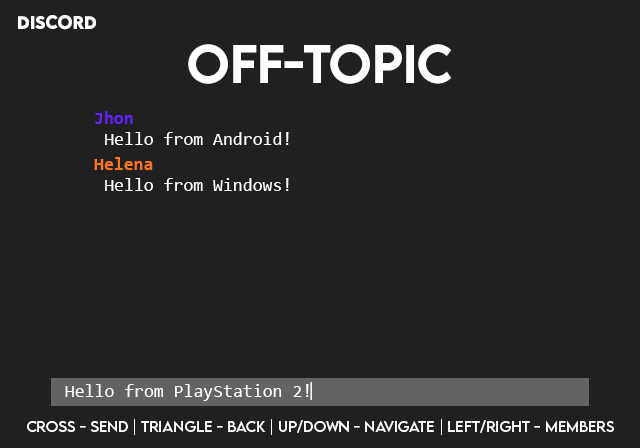
<style>
.page{position:relative;width:640px;height:448px;background:#202020}
.page>*{position:absolute;margin:0}
.t1{font:16px "LEMONMILK-Bold";color:#ffffff}
.t2{font:48px "LEMONMILK-Medium";color:#ffffff}
.t3{font:18px "Consolas-Bold";color:#6720ff}
.t4{font:18px "Consolas";color:#ffffff}
.t5{font:18px "Consolas-Bold";color:#ff7520}
.t6{font:14px "LEMONMILK-Regular";color:#ffffff}
</style>
<div class="page">
<p class="t1" style="left:18px;top:15px;width:78px;height:15px">DISCORD</p>
<p class="t2" style="left:188px;top:44px;width:264px;height:40px">OFF-TOPIC</p>
<p class="t3" style="left:95px;top:111px;width:38px;height:13px">Jhon</p>
<p class="t4" style="left:105px;top:132px;width:184px;height:13px">Hello from Android!</p>
<p class="t5" style="left:94px;top:157px;width:59px;height:13px">Helena</p>
<p class="t4" style="left:105px;top:178px;width:184px;height:13px">Hello from Windows!</p>
<p class="t4" style="left:65px;top:384px;width:244px;height:17px">Hello from PlayStation 2!</p>
<p class="t4" style="left:310px;top:382px;width:2px;height:18px">|</p>
<p class="t6" style="left:27px;top:419px;width:587px;height:16px">CROSS - SEND | TRIANGLE - BACK | UP/DOWN - NAVIGATE | LEFT/RIGHT - MEMBERS</p>
</div>
